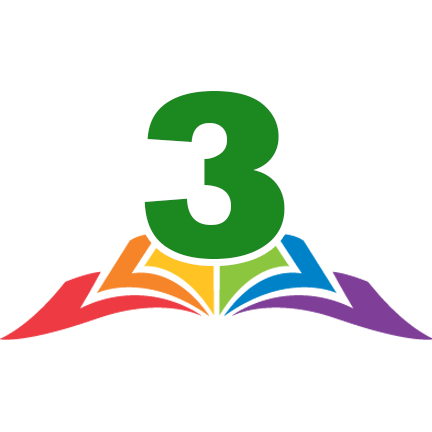
<style>
.page{position:relative;width:432px;height:432px;background:#ffffff}
.page>*{position:absolute;margin:0}
.t1{font:240px "Rockwell-ExtraBold";color:#1b8820}
</style>
<div class="page">
<p class="t1" style="left:144px;top:91px;width:141px;height:168px">3</p>
</div>
